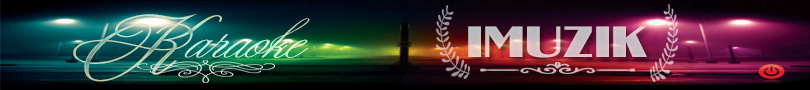
<style>
.page{position:relative;width:810px;height:90px}
.page>*{position:absolute;margin:0}
.t1{font:64.7px "UTM-Yves-KT";scale:1.25 1}
.t2{font:43.6px "UTM-Yves-KT";color:#c1fce0;scale:1.39 1}
.t3{font:36.2px "UTM-Guanine";color:#cdbfc3;scale:1.31 1}
</style>
<div class="page">
<p class="t1" style="left:73px;top:14px;width:149px;height:68px">K</p>
<p class="t2" style="left:184px;top:18px;width:126px;height:40px">araoke</p>
<p class="t3" style="left:468px;top:26px;width:179px;height:32px">IMUZIK</p>
</div>
